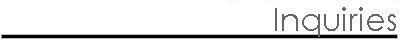
<style>
.page{position:relative;width:403px;height:47px;background:#ffffff}
.page>*{position:absolute;margin:0}
.t1{font:32px "CenturyGothic";color:#666666}
</style>
<div class="page">
<p class="t1" style="left:275px;top:7px;width:121px;height:30px">Inquiries</p>
</div>
